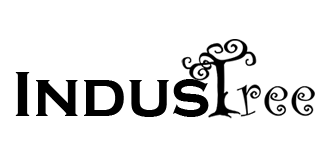
<style>
.page{position:relative;width:332px;height:163px;background:#ffffff}
.page>*{position:absolute;margin:0}
.t1{font:64.5px "CopperplateGothic-Bold";color:#000000}
</style>
<div class="page">
<p class="t1" style="left:15px;top:72px;width:194px;height:45px">Indus</p>
</div>
